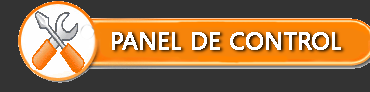
<style>
.page{position:relative;width:370px;height:92px;background:#333333}
.page>*{position:absolute;margin:0}
.t1{font:24px "SegoeUI";color:#ffffff;font-weight:bold}
</style>
<div class="page">
<p class="t1" style="left:112px;top:32px;width:229px;height:18px">PANEL DE CONTROL</p>
</div>
